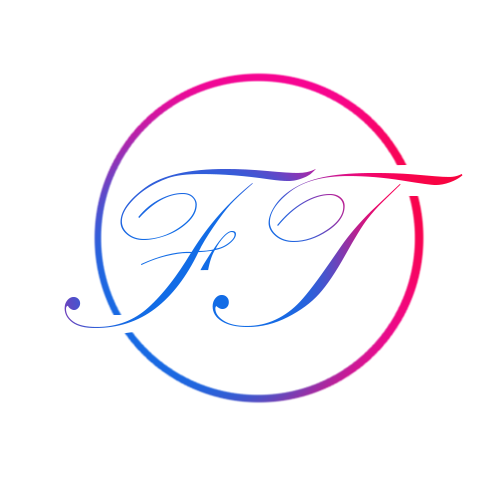
<style>
.page{position:relative;width:500px;height:500px;background:#ffffff}
.page>*{position:absolute;margin:0}
.t1{font:229.6px "KunstlerScript";scale:0.91 1}
</style>
<div class="page">
<p class="t1" style="left:64px;top:168px;width:399px;height:160px">FT</p>
</div>
